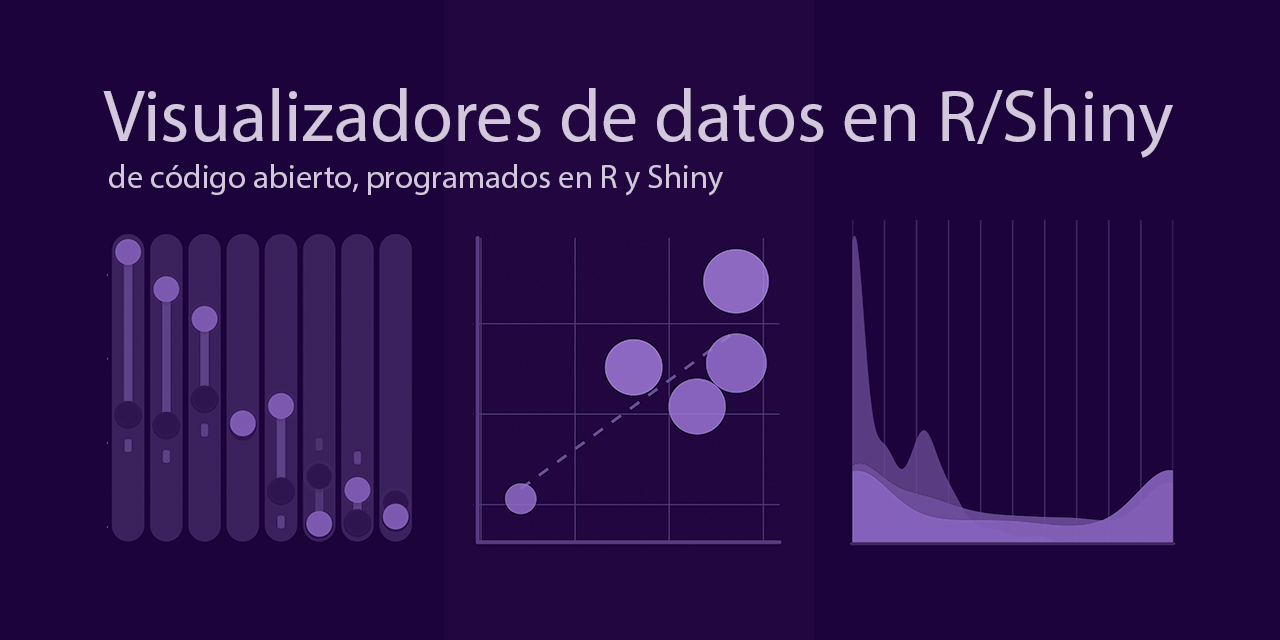
<style>
.page{position:relative;width:1280px;height:640px;background:#1c033b}
.page>*{position:absolute;margin:0}
.t1{font:74.5px "MyriadPro-Regular";color:#d3c7dd}
.t2{font:33px "MyriadPro-Regular";color:#d3c7dd}
</style>
<div class="page">
<p class="t1" style="left:103px;top:88px;width:1070px;height:70px">Visualizadores de datos en R/Shiny</p>
<p class="t2" style="left:109px;top:164px;width:614px;height:32px">de código abierto, programados en R y Shiny</p>
</div>
